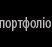
<style>
.page{position:relative;width:52px;height:47px;background:#000000}
.page>*{position:absolute;margin:0}
.t1{font:16px "MyriadPro-Cond";color:#b9b5b5}
</style>
<div class="page">
<p class="t1" style="left:0px;top:16px;width:51px;height:15px">портфоліо</p>
</div>
